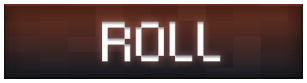
<style>
.page{position:relative;width:307px;height:83px}
.page>*{position:absolute;margin:0}
.t1{font:90px "Kenney-Pixel";color:#ffffff}
</style>
<div class="page">
<p class="t1" style="left:102px;top:21px;width:119px;height:41px">ROLL</p>
</div>
